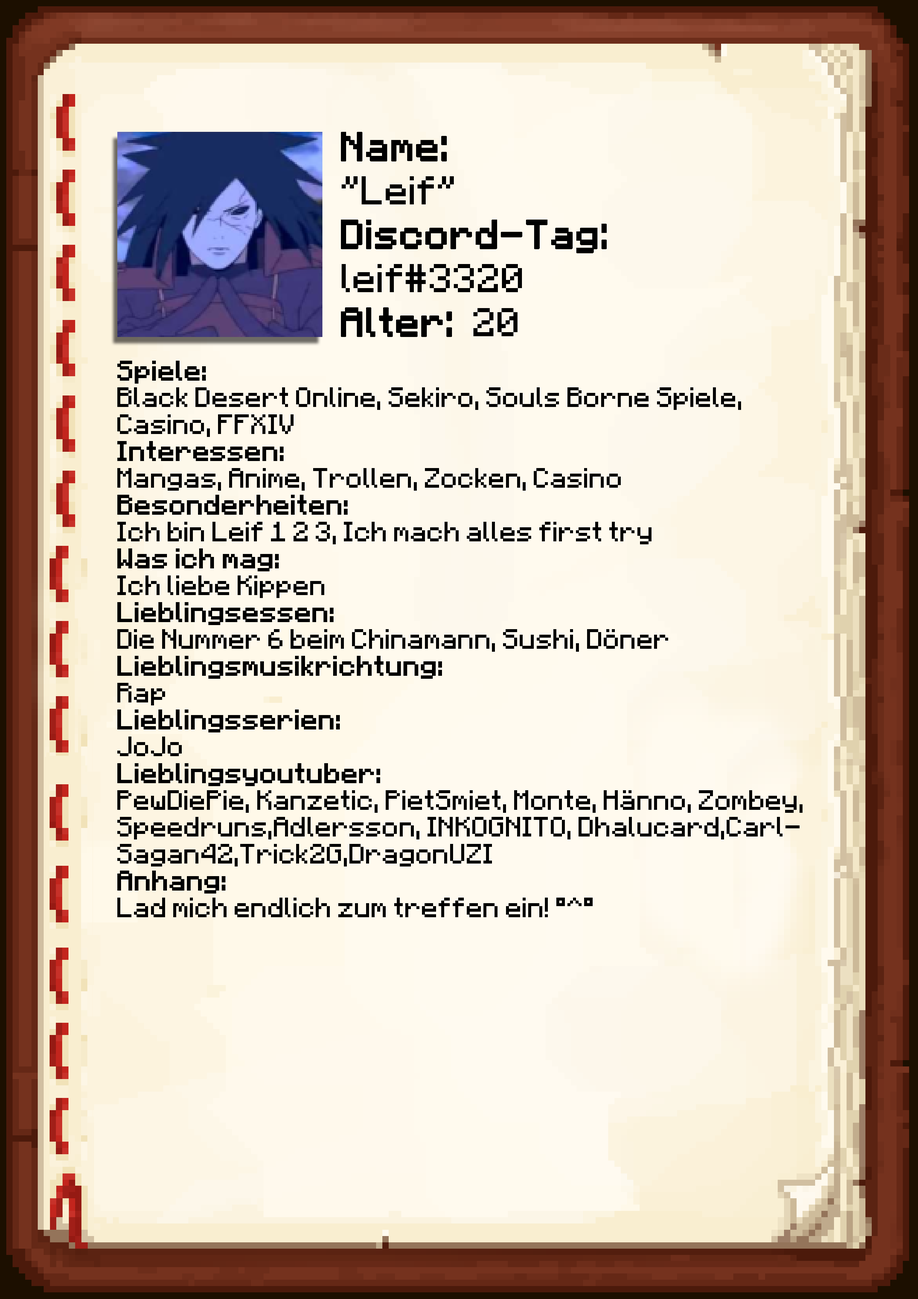
<style>
.page{position:relative;width:918px;height:1299px}
.page>*{position:absolute;margin:0}
.t1{font:40.1px/43.9px "Minecraft-Regular";color:#000000;font-weight:bold}
.t2{font:40.1px/43.9px "Minecraft-Regular";color:#000000}
.t3{font:22.4px "Minecraft";color:#000000}
.t4{font:22.4px "Minecraft";color:#000000;font-weight:bold}
</style>
<div class="page">
<p class="t1" style="left:341px;top:132px;width:266px;height:205px">Name:<br><span class="t2">"Leif"<br></span>Discord-Tag:<br><span class="t2">leif#3320<br></span>Alter: <span class="t2">20</span></p>
<p class="t3" style="left:117px;top:361px;width:686px;height:556px"><span class="t4">Spiele: <br></span>Black Desert Online, Sekiro, Souls Borne Spiele, Casino, FFXIV<br><span class="t4">Interessen:<br></span>Mangas, Anime, Trollen, Zocken, Casino<br><span class="t4">Besonderheiten:<br></span>Ich bin Leif 1 2 3, Ich mach alles first try<br><span class="t4">Was ich mag:<br></span>Ich liebe Kippen<br><span class="t4">Lieblingsessen:<br></span>Die Nummer 6 beim Chinamann, Sushi, Döner<br><span class="t4">Lieblingsmusikrichtung:<br></span>Rap<br><span class="t4">Lieblingsserien:<br></span>JoJo<br><span class="t4">Lieblingsyoutuber:<br></span>PewDiePie, Kanzetic, PietSmiet, Monte, Hänno, Zombey, Speedruns,Adlersson, INKOGNITO, Dhalucard,CarlSagan42,Trick2G,DragonUZI<br><span class="t4">Anhang:<br></span>Lad mich endlich zum treffen ein! °^°</p>
</div>
